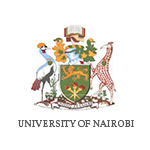
<style>
.page{position:relative;width:150px;height:150px;background:#ffffff}
.page>*{position:absolute;margin:0}
.t1{font:10px "Vollkorn-Regular";color:#575757}
</style>
<div class="page">
<p class="t1" style="left:18px;top:120px;width:116px;height:7px">UNIVERSITY OF NAIROBI</p>
</div>
